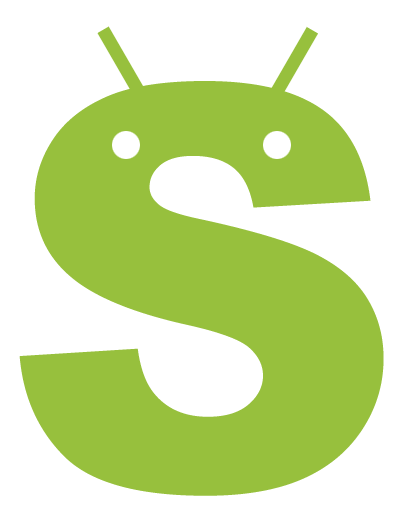
<style>
.page{position:relative;width:419px;height:525px;background:#ffffff}
.page>*{position:absolute;margin:0}
.t1{font:560px "Arial-Black";color:#97c03d}
</style>
<div class="page">
<p class="t1" style="left:19px;top:81px;width:365px;height:415px">S</p>
</div>
